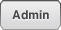
<style>
.page{position:relative;width:61px;height:30px}
.page>*{position:absolute;margin:0}
.t1{font:12px "Helvetica-Bold";color:#474747}
</style>
<div class="page">
<p class="t1" style="left:12px;top:10px;width:37px;height:10px">Admin</p>
</div>
